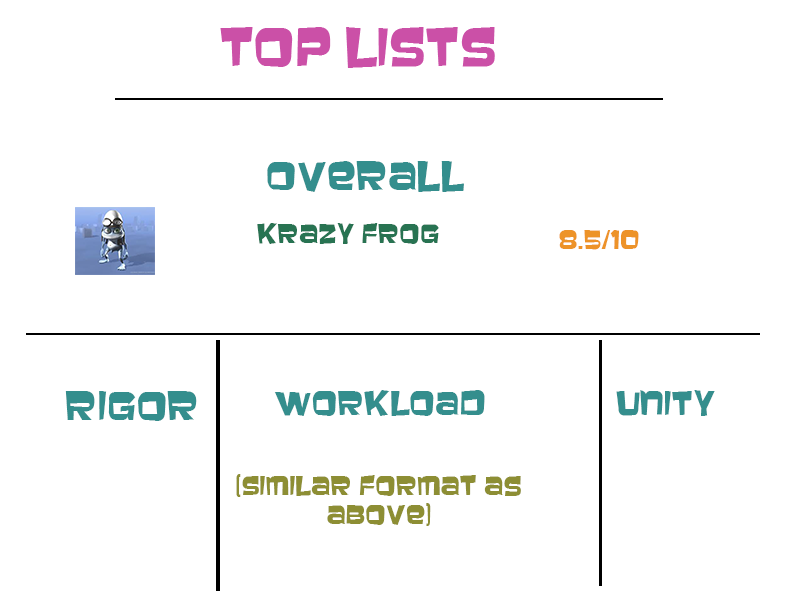
<style>
.page{position:relative;width:800px;height:600px;background:#ffffff}
.page>*{position:absolute;margin:0}
.t1{font:36px "Baveuse";color:#348e8d}
.t2{font:24px "Baveuse";color:#287352}
.t3{font:24px "Baveuse";color:#ed9329}
.t4{font:30px "Baveuse";color:#348e8d}
.t5{font:24px "Baveuse";color:#8d8e34}
</style>
<div class="page">
<p class="t1" style="left:267px;top:161px;width:197px;height:31px">Overall</p>
<p class="t2" style="left:257px;top:223px;width:182px;height:21px">Krazy Frog</p>
<p class="t3" style="left:559px;top:230px;width:80px;height:20px">8.5/10</p>
<p class="t4" style="left:274px;top:390px;width:211px;height:26px">Workload</p>
<p class="t4" style="left:616px;top:390px;width:99px;height:26px">Unity</p>
<p class="t1" style="left:65px;top:391px;width:132px;height:30px">Rigor</p>
<p class="t5" style="left:236px;top:474px;width:285px;height:52px;text-align:center">(Similar Format as above)</p>
</div>
